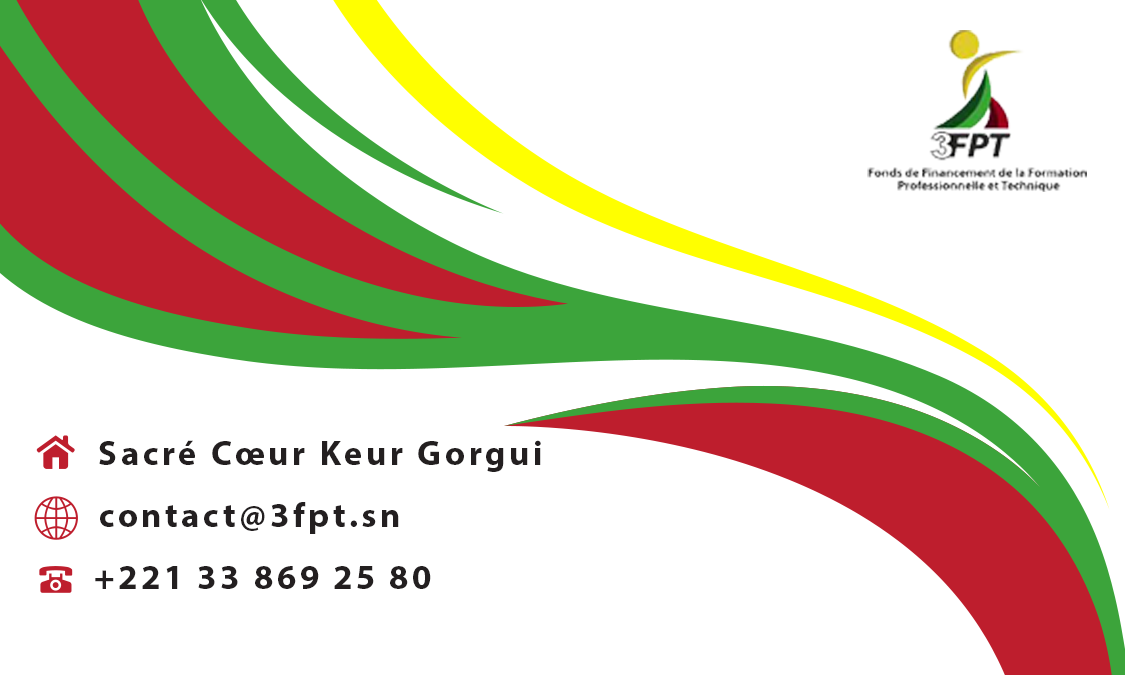
<style>
.page{position:relative;width:1125px;height:675px;background:#ffffff}
.page>*{position:absolute;margin:0}
.t1{font:35px "MyriadPro-Bold";letter-spacing:0.1em;color:#231f20}
.t2{font:26.9px "MyriadPro-Regular";letter-spacing:0.1em;color:#231f20}
</style>
<div class="page">
<p class="t1" style="left:99px;top:440px;width:442px;height:32px">Sacré Cœur Keur Gorgui</p>
<p class="t1" style="left:100px;top:502px;width:299px;height:32px">contact@3fpt.sn</p>
<p class="t1" style="left:95px;top:566px;width:336px;height:23px"><span class="t2"> </span>+221 33 869 25 80</p>
</div>
